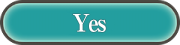
<style>
.page{position:relative;width:180px;height:45px;background:#239e9f}
.page>*{position:absolute;margin:0}
.t1{font:24px "RyuminPro-ExBold";letter-spacing:-0.08em;color:#ffffff;scale:0.9 1}
</style>
<div class="page">
<p class="t1" style="left:73px;top:14px;width:33px;height:18px">Yes</p>
</div>
